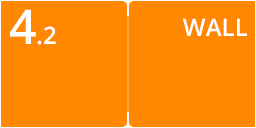
<style>
.page{position:relative;width:256px;height:128px;background:#ff8800}
.page>*{position:absolute;margin:0}
.t1{font:24px "OpenSans-Semibold";color:#ffffff}
.t2{font:48px "OpenSans-Semibold";color:#ffffff}
</style>
<div class="page">
<p class="t1" style="left:10px;top:9px;width:46px;height:36px"><span class="t2">4</span>.2</p>
<p class="t1" style="left:183px;top:18px;width:64px;height:18px">WALL</p>
</div>
